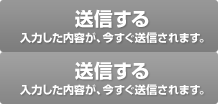
<style>
.page{position:relative;width:218px;height:104px}
.page>*{position:absolute;margin:0}
.t1{font:18.8px "ShinGoPro-Bold";color:#ffffff}
.t2{font:11px "ShinGoPro-Bold";color:#ffffff}
</style>
<div class="page">
<p class="t1" style="left:75px;top:9px;width:74px;height:19px">送信する</p>
<p class="t2" style="left:20px;top:32px;width:184px;height:11px">入力した内容が、今すぐ送信されます。</p>
<p class="t1" style="left:75px;top:61px;width:74px;height:19px">送信する</p>
<p class="t2" style="left:20px;top:84px;width:184px;height:11px">入力した内容が、今すぐ送信されます。</p>
</div>
